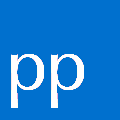
<style>
.page{position:relative;width:120px;height:120px;background:#0070ce}
.page>*{position:absolute;margin:0}
.t1{font:72px "Optima-Regular";color:#ffffff}
</style>
<div class="page">
<p class="t1" style="left:11px;top:54px;width:73px;height:54px">pp</p>
</div>
